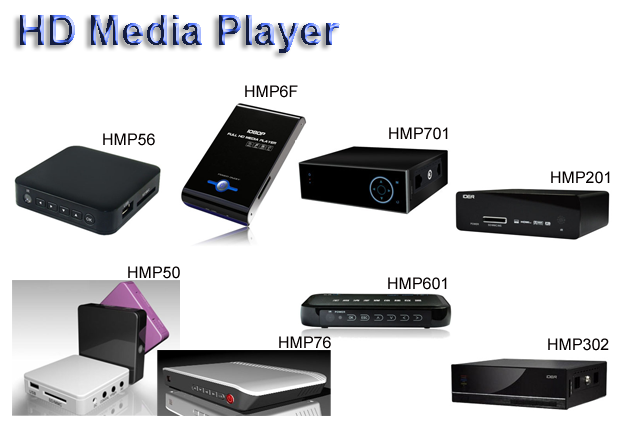
<style>
.page{position:relative;width:624px;height:446px;background:#ffffff}
.page>*{position:absolute;margin:0}
.t1{font:41.1px "Arial-BoldMT"}
.t2{font:16px "ArialMT";color:#050000}
</style>
<div class="page">
<p class="t1" style="left:20px;top:15px;width:320px;height:38px">HD Media Player</p>
<p class="t2" style="left:245px;top:85px;width:53px;height:13px">HMP6F</p>
<p class="t2" style="left:103px;top:133px;width:52px;height:13px">HMP56</p>
<p class="t2" style="left:389px;top:127px;width:59px;height:13px">HMP701</p>
<p class="t2" style="left:551px;top:171px;width:59px;height:13px">HMP201</p>
<p class="t2" style="left:128px;top:266px;width:52px;height:13px">HMP50</p>
<p class="t2" style="left:388px;top:277px;width:59px;height:13px">HMP601</p>
<p class="t2" style="left:279px;top:336px;width:52px;height:13px">HMP76</p>
<p class="t2" style="left:548px;top:338px;width:61px;height:13px">HMP302</p>
</div>
